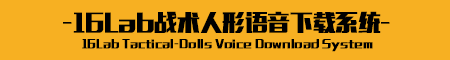
<style>
.page{position:relative;width:450px;height:60px;background:#f7b022}
.page>*{position:absolute;margin:0}
.t1{font:22px "MFLiHei_Noncommercial-Regular";color:#000000;font-weight:bold}
.t2{font:10px "MFLiHei_Noncommercial-Regular";color:#000000;font-weight:bold}
</style>
<div class="page">
<p class="t1" style="left:63px;top:11px;width:327px;height:22px">-16Lab战术人形语音下载系统-</p>
<p class="t2" style="left:82px;top:39px;width:291px;height:13px">16Lab Tactical-Dolls Voice Download System</p>
</div>
